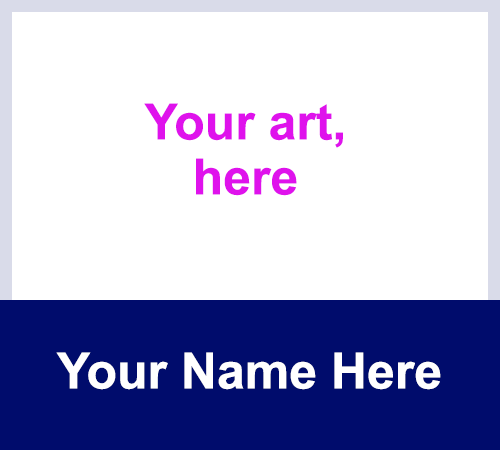
<style>
.page{position:relative;width:500px;height:450px;background:#ffffff}
.page>*{position:absolute;margin:0}
.t1{font:50px/55px "Arial-BoldMT";color:#df12ec}
.t2{font:50px "Arial-BoldMT";color:#ffffff}
</style>
<div class="page">
<p class="t1" style="left:144px;top:103px;width:199px;height:93px;text-align:center">Your art,<br>here</p>
<p class="t2" style="left:56px;top:352px;width:385px;height:38px">Your Name Here</p>
</div>
